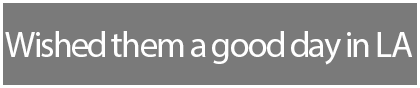
<style>
.page{position:relative;width:420px;height:88px;background:#7a7a7a}
.page>*{position:absolute;margin:0}
.t1{font:36px "MyriadPro-Regular";letter-spacing:-0.05em;color:#ffffff}
</style>
<div class="page">
<p class="t1" style="left:5px;top:31px;width:407px;height:34px">Wished them a good day in LA</p>
</div>
